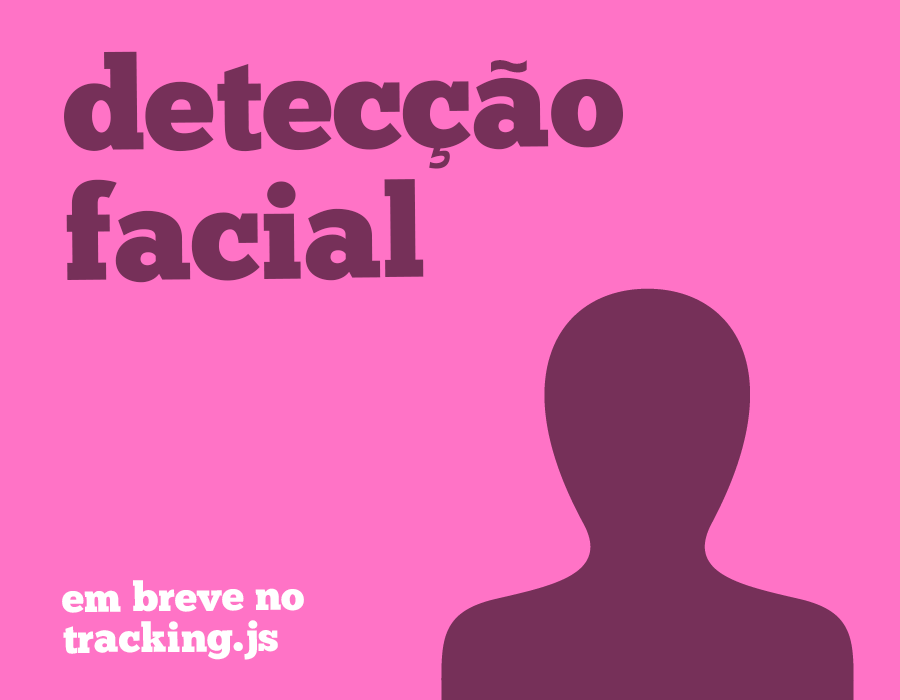
<style>
.page{position:relative;width:900px;height:700px;background:#ff73c6}
.page>*{position:absolute;margin:0}
.t1{font:130.1px/130.1px "ChunkFive-Roman";color:#763059}
.t2{font:89px "ChunkFive-Roman";color:#763059}
.t3{font:40.9px/40.9px "ChunkFive-Roman";color:#ffffff}
</style>
<div class="page">
<p class="t1" style="left:64px;top:51px;width:559px;height:232px">detecçao<br>facial</p>
<p class="t2" style="left:491px;top:60px;width:36px;height:13px">~</p>
<p class="t3" style="left:62px;top:580px;width:242px;height:80px">em breve no<br>tracking.js</p>
</div>
